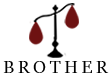
<style>
.page{position:relative;width:109px;height:77px;background:#ffffff}
.page>*{position:absolute;margin:0}
.t1{font:20px "SitkaBanner";letter-spacing:0.2em;color:#000000;text-transform:uppercase}
</style>
<div class="page">
<p class="t1" style="left:3px;top:61px;width:106px;height:12px">Brother</p>
</div>
